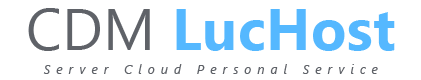
<style>
.page{position:relative;width:421px;height:80px;background:#ffffff}
.page>*{position:absolute;margin:0}
.t1{font:58.3px "SegoeUI-Bold";letter-spacing:0.005em;color:#55b8ff}
.t2{font:58.3px "SegoeUI";letter-spacing:0.005em;color:#5f6268}
.t3{font:12.5px "SegoeUI-Italic";letter-spacing:0.5em;color:#5f6268}
</style>
<div class="page">
<p class="t1" style="left:28px;top:8px;width:367px;height:43px"><span class="t2">CDM </span>LucHost</p>
<p class="t3" style="left:43px;top:64px;width:335px;height:10px">Server Cloud Personal Service</p>
</div>
